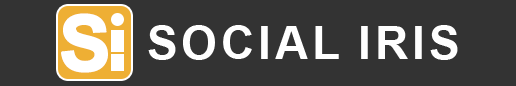
<style>
.page{position:relative;width:516px;height:86px;background:#333333}
.page>*{position:absolute;margin:0}
.t1{font:76.7px "Arial-BoldMT";letter-spacing:-0.11em;color:#ffffff;text-transform:uppercase;font-weight:bold}
.t2{font:46px "Arial-BoldMT";letter-spacing:0.05em;color:#ffffff;text-transform:uppercase}
</style>
<div class="page">
<p class="t1" style="left:61px;top:13px;width:64px;height:60px">SI</p>
<p class="t2" style="left:148px;top:25px;width:310px;height:35px">Social IRIS</p>
</div>
